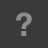
<style>
.page{position:relative;width:48px;height:48px;background:#3a3a3a}
.page>*{position:absolute;margin:0}
.t1{font:32px "HelveticaNeue-Bold";color:#8e8e8e}
</style>
<div class="page">
<p class="t1" style="left:16px;top:12px;width:16px;height:24px">?</p>
</div>
